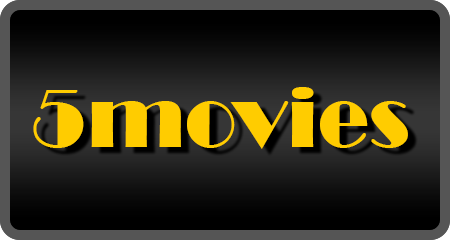
<style>
.page{position:relative;width:450px;height:240px}
.page>*{position:absolute;margin:0}
.t1{font:85px "Broadway";color:#ffcc00}
</style>
<div class="page">
<p class="t1" style="left:33px;top:87px;width:375px;height:62px">5movies</p>
</div>
